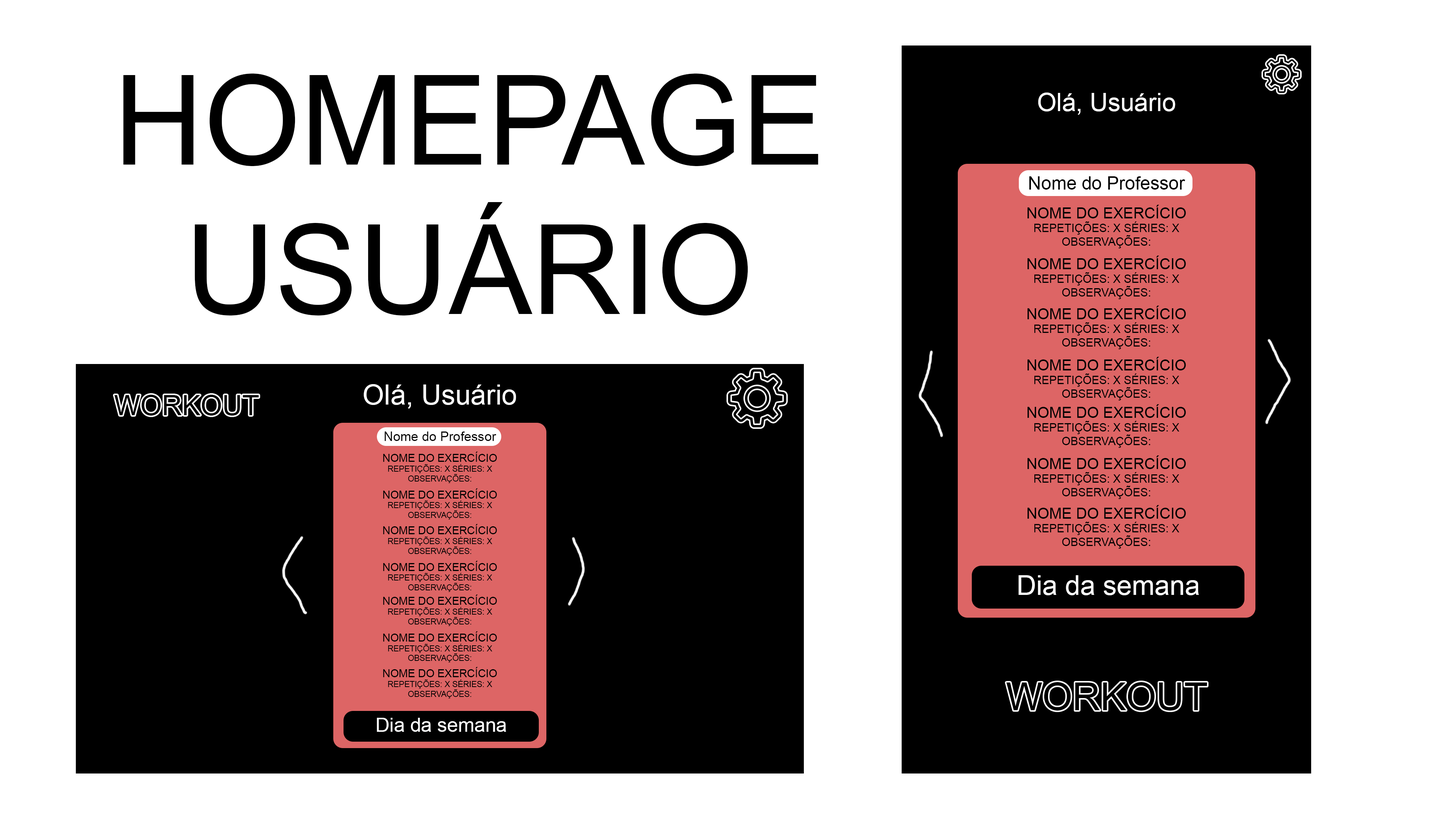
<style>
.page{position:relative;width:1456px;height:819px;background:#ffffff}
.page>*{position:absolute;margin:0}
.t1{font:124.7px "ArialMT";color:#000000}
.t2{font:25px "ArialMT";color:#ffffff}
.t3{font:18.2px "ArialMT";color:#000000}
.t4{font:11.4px "ArialMT";color:#000000}
.t5{font:15.2px "ArialMT";color:#000000}
.t6{font:27.8px "ArialMT";color:#ffffff}
.t7{font:27.7px "ArialMT";color:#000000}
.t8{font:13px "ArialMT";color:#000000}
.t9{font:8.2px "ArialMT";color:#000000}
.t10{font:10.9px "ArialMT";color:#000000}
.t11{font:27.3px "ArialMT";color:#ffffff}
.t12{font:38.7px "ArialMT";color:#000000}
.t13{font:19.6px "ArialMT";color:#ffffff}
</style>
<div class="page">
<p class="t1" style="left:123px;top:74px;width:695px;height:241px;text-align:center">HOMEPAGE USUÁRIO</p>
<p class="t2" style="left:1038px;top:93px;width:137px;height:22px">Olá, Usuário</p>
<p class="t3" style="left:1029px;top:176px;width:156px;height:14px">Nome do Professor</p>
<p class="t4" style="left:1028px;top:205px;width:158px;height:43px;text-align:center"><span class="t5">NOME DO EXERCÍCIO<br></span>REPETIÇÕES: X SÉRIES: X<br>OBSERVAÇÕES:</p>
<p class="t4" style="left:1028px;top:256px;width:158px;height:43px;text-align:center"><span class="t5">NOME DO EXERCÍCIO<br></span>REPETIÇÕES: X SÉRIES: X<br>OBSERVAÇÕES:</p>
<p class="t4" style="left:1028px;top:306px;width:158px;height:43px;text-align:center"><span class="t5">NOME DO EXERCÍCIO<br></span>REPETIÇÕES: X SÉRIES: X<br>OBSERVAÇÕES:</p>
<p class="t4" style="left:1028px;top:357px;width:158px;height:43px;text-align:center"><span class="t5">NOME DO EXERCÍCIO<br></span>REPETIÇÕES: X SÉRIES: X<br>OBSERVAÇÕES:</p>
<p class="t6" style="left:364px;top:384px;width:152px;height:25px">Olá, Usuário</p>
<p class="t7" style="left:114px;top:395px;width:145px;height:21px">WORKOUT</p>
<p class="t4" style="left:1028px;top:404px;width:158px;height:44px;text-align:center"><span class="t5">NOME DO EXERCÍCIO<br></span>REPETIÇÕES: X SÉRIES: X<br>OBSERVAÇÕES:</p>
<p class="t8" style="left:384px;top:431px;width:112px;height:10px">Nome do Professor</p>
<p class="t9" style="left:383px;top:452px;width:114px;height:31px;text-align:center"><span class="t10">NOME DO EXERCÍCIO<br></span>REPETIÇÕES: X SÉRIES: X<br>OBSERVAÇÕES:</p>
<p class="t4" style="left:1028px;top:455px;width:158px;height:44px;text-align:center"><span class="t5">NOME DO EXERCÍCIO<br></span>REPETIÇÕES: X SÉRIES: X<br>OBSERVAÇÕES:</p>
<p class="t9" style="left:383px;top:488px;width:114px;height:31px;text-align:center"><span class="t10">NOME DO EXERCÍCIO<br></span>REPETIÇÕES: X SÉRIES: X<br>OBSERVAÇÕES:</p>
<p class="t4" style="left:1028px;top:505px;width:158px;height:44px;text-align:center"><span class="t5">NOME DO EXERCÍCIO<br></span>REPETIÇÕES: X SÉRIES: X<br>OBSERVAÇÕES:</p>
<p class="t9" style="left:383px;top:524px;width:114px;height:31px;text-align:center"><span class="t10">NOME DO EXERCÍCIO<br></span>REPETIÇÕES: X SÉRIES: X<br>OBSERVAÇÕES:</p>
<p class="t9" style="left:383px;top:561px;width:114px;height:31px;text-align:center"><span class="t10">NOME DO EXERCÍCIO<br></span>REPETIÇÕES: X SÉRIES: X<br>OBSERVAÇÕES:</p>
<p class="t11" style="left:1018px;top:575px;width:181px;height:20px">Dia da semana</p>
<p class="t9" style="left:383px;top:595px;width:114px;height:31px;text-align:center"><span class="t10">NOME DO EXERCÍCIO<br></span>REPETIÇÕES: X SÉRIES: X<br>OBSERVAÇÕES:</p>
<p class="t9" style="left:383px;top:631px;width:114px;height:31px;text-align:center"><span class="t10">NOME DO EXERCÍCIO<br></span>REPETIÇÕES: X SÉRIES: X<br>OBSERVAÇÕES:</p>
<p class="t9" style="left:383px;top:667px;width:114px;height:31px;text-align:center"><span class="t10">NOME DO EXERCÍCIO<br></span>REPETIÇÕES: X SÉRIES: X<br>OBSERVAÇÕES:</p>
<p class="t12" style="left:1006px;top:682px;width:201px;height:29px">WORKOUT</p>
<p class="t13" style="left:377px;top:718px;width:129px;height:14px">Dia da semana</p>
</div>
